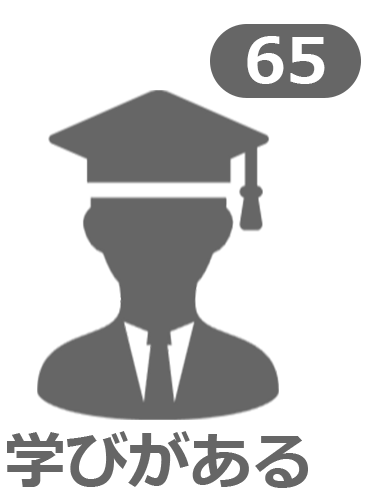
<style>
.page{position:relative;width:369px;height:500px;background:#ffffff}
.page>*{position:absolute;margin:0}
.t1{font:62.1px "Meiryo-Bold";color:#ffffff}
.t2{font:62.1px "Meiryo-Bold";color:#666666}
</style>
<div class="page">
<p class="t1" style="left:247px;top:36px;width:78px;height:48px">65</p>
<p class="t2" style="left:7px;top:431px;width:301px;height:57px">学びがある</p>
</div>
